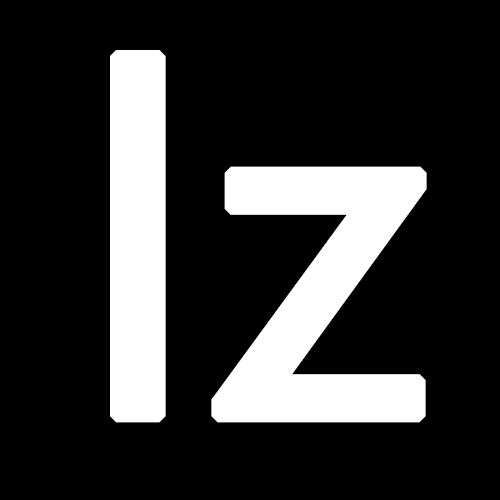
<style>
.page{position:relative;width:500px;height:500px;background:#000000}
.page>*{position:absolute;margin:0}
.t1{font:450px "MicrosoftYaHei";color:#ffffff;font-weight:bold}
</style>
<div class="page">
<p class="t1" style="left:110px;top:50px;width:317px;height:373px">lz</p>
</div>
